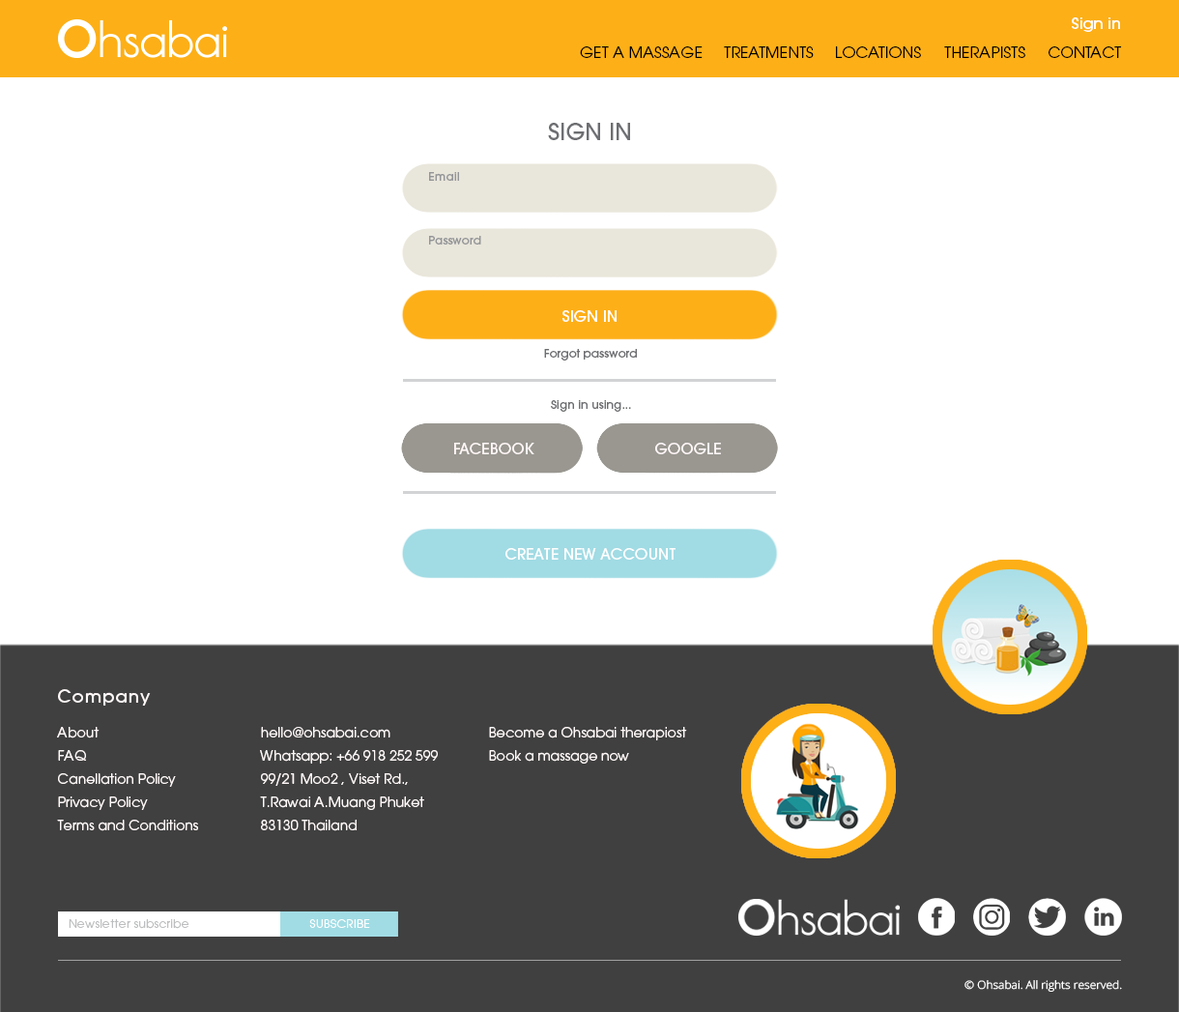
<style>
.page{position:relative;width:1179px;height:1012px;background:#ffffff}
.page>*{position:absolute;margin:0}
.t1{font:14.7px "ITCAvantGardePro-Md";color:#ffffff;scale:1.05 1}
.t2{font:14.7px "ITCAvantGardePro-Bk";color:#000000;scale:1.05 1}
.t3{font:23.2px "ITCAvantGardePro-Md";color:#6d6e71}
.t4{font:11.6px "ITCAvantGardePro-Md";color:#939598}
.t5{font:15.5px "ITCAvantGardePro-Md";color:#ffffff}
.t6{font:11.6px "ITCAvantGardePro-Md";color:#6d6e71}
.t7{font:15.5px "ITCAvantGardePro-Md";color:#fff7f7}
.t8{font:15.5px "ITCAvantGardePro-Md";color:#fff7f8}
.t9{font:13.5px/23.2px "ITCAvantGardePro-Bk";color:#fff8f8}
.t10{font:17.4px/23.2px "ITCAvantGardePro-Md";letter-spacing:0.05em;color:#fff8f8}
.t11{font:13.5px/34.8px "ITCAvantGardePro-Bk";color:#fff8f8}
.t12{font:11.6px "ITCAvantGardePro-Bk";letter-spacing:0.025em;color:#bdbebf}
.t13{font:11.6px "ITCAvantGardePro-Bk";letter-spacing:0.025em;color:#fefefe}
.t14{font:11px "OpenSans-Light";color:#ffffff;scale:1.05 1}
</style>
<div class="page">
<p class="t1" style="left:1072px;top:17px;width:48px;height:15px">Sign in</p>
<p class="t2" style="left:580px;top:46px;width:122px;height:12px">GET A MASSAGE</p>
<p class="t2" style="left:724px;top:46px;width:197px;height:12px">TREATMENTS     LOCATIONS</p>
<p class="t2" style="left:944px;top:46px;width:81px;height:12px">THERAPISTS</p>
<p class="t2" style="left:1048px;top:46px;width:74px;height:12px">CONTACT</p>
<p class="t3" style="left:548px;top:123px;width:82px;height:17px">SIGN IN</p>
<p class="t4" style="left:429px;top:172px;width:30px;height:9px">Email</p>
<p class="t4" style="left:429px;top:236px;width:52px;height:8px">Password</p>
<p class="t5" style="left:562px;top:310px;width:54px;height:12px">SIGN IN</p>
<p class="t6" style="left:544px;top:349px;width:93px;height:11px">Forgot password</p>
<p class="t6" style="left:551px;top:400px;width:80px;height:12px">Sign in using...</p>
<p class="t7" style="left:454px;top:443px;width:80px;height:11px">FACEBOOK</p>
<p class="t8" style="left:655px;top:443px;width:66px;height:11px">GOOGLE</p>
<p class="t5" style="left:505px;top:548px;width:170px;height:11px">CREATE NEW ACCOUNT</p>
<p class="t9" style="left:57px;top:689px;width:141px;height:142px;text-align:justify"><span class="t10">Company<br></span><span class="t11">About<br></span>FAQ<br>Canellation Policy<br>Privacy Policy<br>Terms and Conditions</p>
<p class="t9" style="left:260px;top:727px;width:178px;height:104px;text-align:justify"><span class="t10"> </span><span class="t11"><br>hello@ohsabai.com<br></span>Whatsapp: +66 918 252 599<br>99/21 Moo2 , Viset Rd., <br>T.Rawai A.Muang Phuket <br>83130 Thailand</p>
<p class="t11" style="left:489px;top:727px;width:198px;height:36px;text-align:justify"><span class="t10"> <br></span>Become a Ohsabai therapiost<span class="t9"><br>Book a massage now</span></p>
<p class="t12" style="left:69px;top:919px;width:120px;height:10px">Newsletter subscribe</p>
<p class="t13" style="left:309px;top:919px;width:61px;height:9px">SUBSCRIBE</p>
<p class="t14" style="left:964px;top:980px;width:158px;height:11px">© Ohsabai. All rights reserved.</p>
</div>
